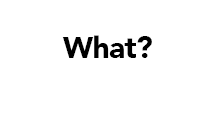
<style>
.page{position:relative;width:214px;height:117px;background:#ffffff}
.page>*{position:absolute;margin:0}
.t1{font:30px "Avenir-Black";letter-spacing:-0.02em;color:#000000}
</style>
<div class="page">
<p class="t1" style="left:62px;top:35px;width:90px;height:23px">What?</p>
</div>
